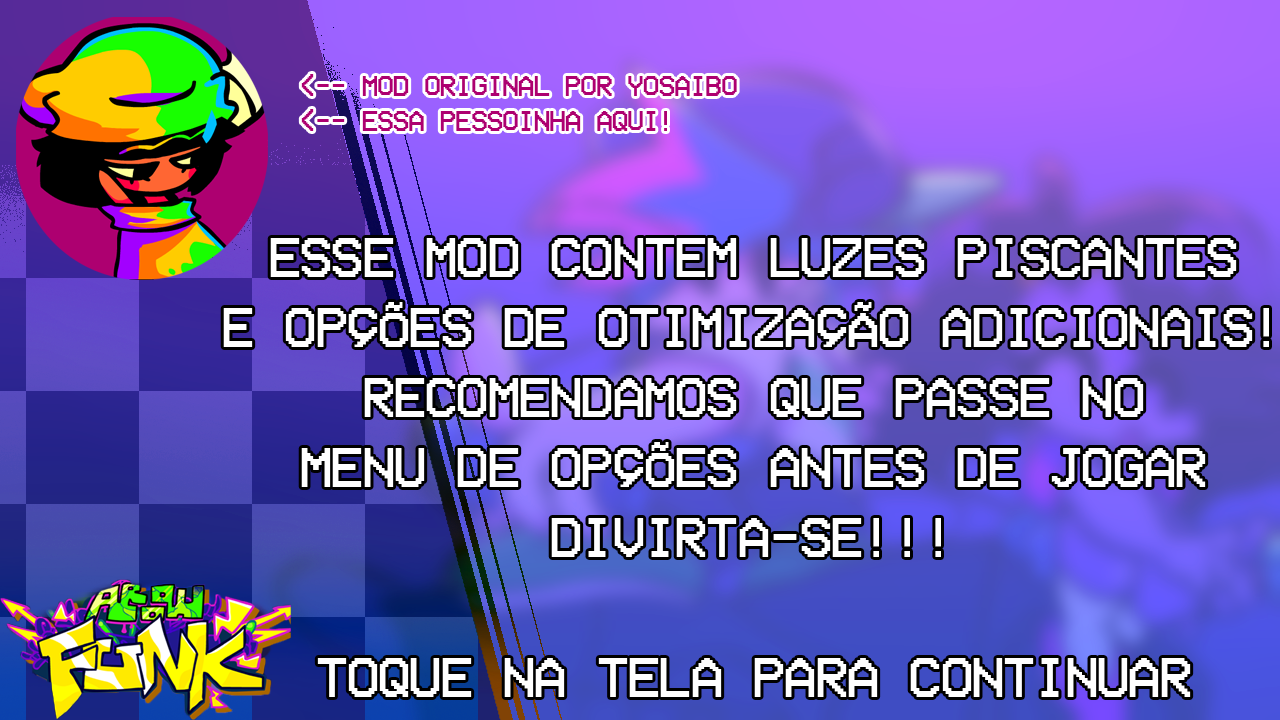
<style>
.page{position:relative;width:1280px;height:720px}
.page>*{position:absolute;margin:0}
.t1{font:29.2px "VCROSDMono";letter-spacing:-0.05em;color:#ad0070;text-transform:uppercase}
.t2{font:58.3px "VCROSDMono";letter-spacing:-0.05em;color:#ffffff;text-transform:uppercase}
</style>
<div class="page">
<p class="t1" style="left:301px;top:74px;width:436px;height:57px">&lt;-- Mod original por yosaibo<br>&lt;-- essa pessoinha aqui!</p>
<p class="t2" style="left:223px;top:238px;width:1046px;height:459px;text-align:center">Esse mod contem luzes piscantes<br>e opções de otimização adicionais!<br>recomendamos que passe no<br>menu de opções antes de jogar<br>divirta-se!!!<br><br>toque na tela para continuar</p>
</div>
